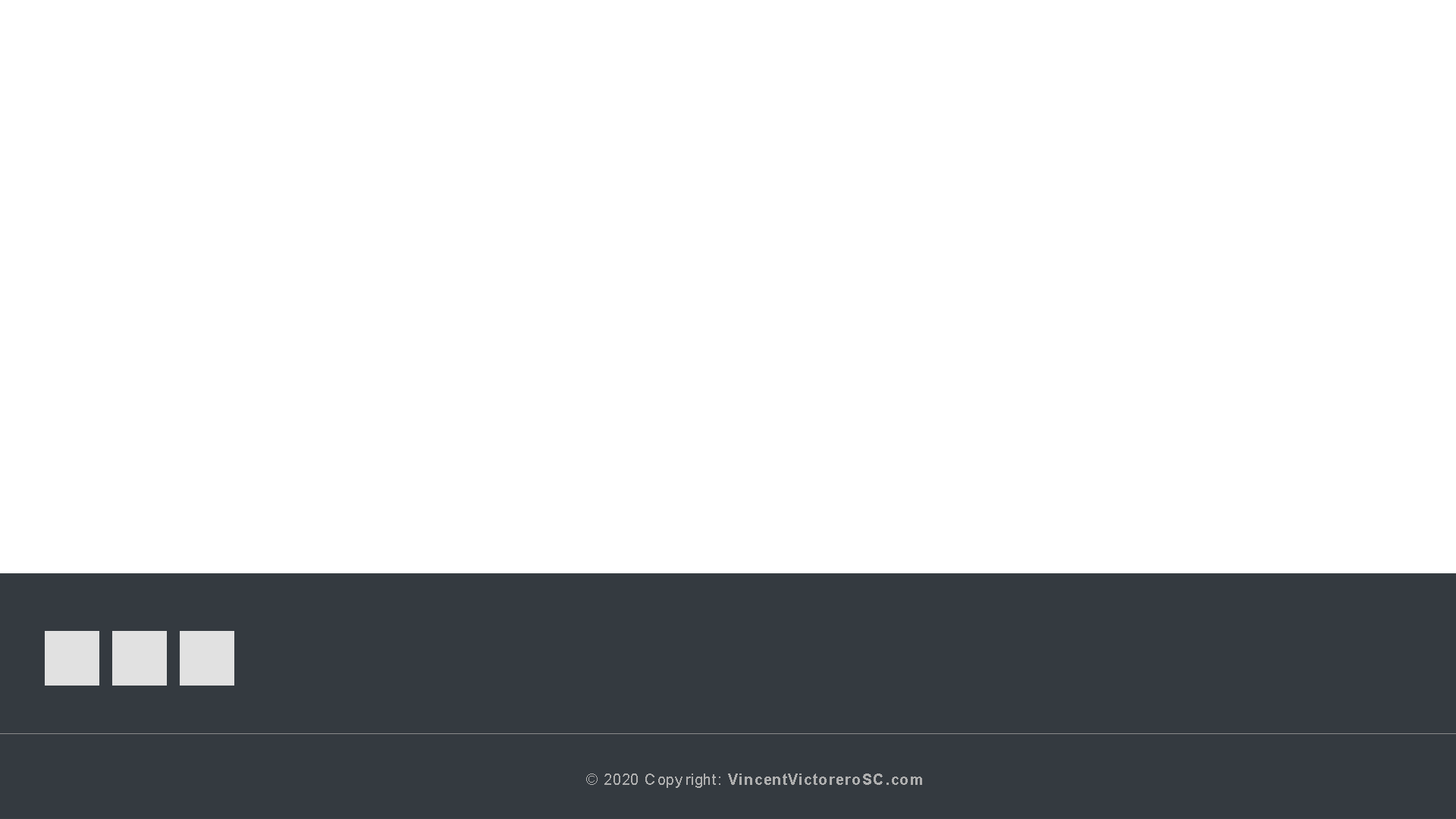
<style>
.page{position:relative;width:1456px;height:819px;background:#ffffff}
.page>*{position:absolute;margin:0}
.t1{font:15.2px "Arial-BoldMT";color:#afafaf}
.t2{font:15.2px "ArialMT";color:#afafaf}
</style>
<div class="page">
<p class="t1" style="left:586px;top:773px;width:336px;height:15px"><span class="t2">© 2020 Copyright: </span>VincentVictoreroSC.com</p>
</div>
